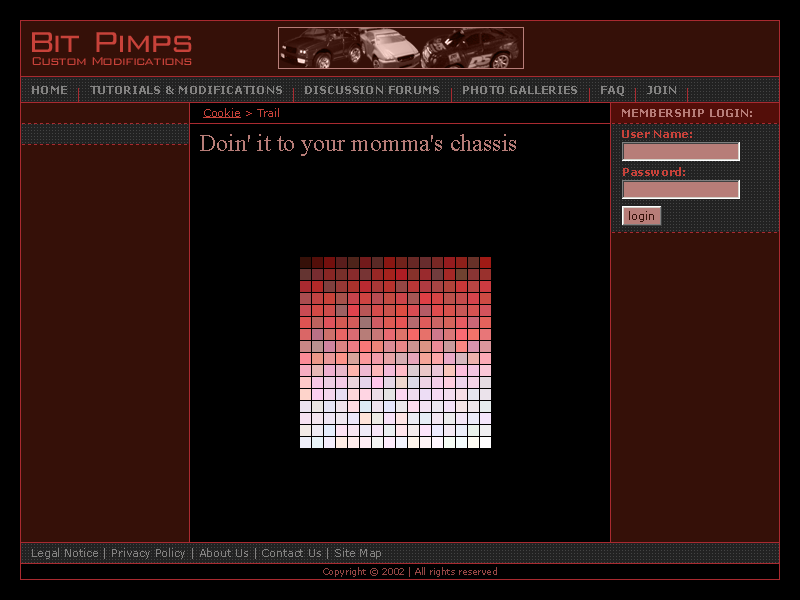
<style>
.page{position:relative;width:800px;height:600px;background:#000000}
.page>*{position:absolute;margin:0}
.t1{font:30px "WallStreet";letter-spacing:0.05em;color:#c8423a}
.t2{font:12px "WallStreet";letter-spacing:0.05em;color:#c8423a}
.t3{font:11px "Verdana";color:#c8423a}
.t4{font:11px "Verdana";color:#c8423a;text-decoration:underline}
.t5{font:11px "Verdana-Bold";color:#b77d78}
.t6{font:24px "TimesNewRomanPSMT";color:#b77d78}
.t7{font:11px "Verdana-Bold";color:#c8423a}
.t8{font:11px "Verdana";color:#838281}
.t9{font:9px "Verdana";color:#954644}
</style>
<div class="page">
<p class="t1" style="left:32px;top:32px;width:160px;height:20px">Bit Pimps</p>
<p class="t2" style="left:32px;top:57px;width:160px;height:8px">Custom Modifications</p>
<p class="t3" style="left:203px;top:108px;width:76px;height:10px"><span class="t4">Cookie</span> &gt; Trail</p>
<p class="t5" style="left:622px;top:109px;width:130px;height:8px">MEMBERSHIP LOGIN:</p>
<p class="t6" style="left:200px;top:134px;width:316px;height:22px">Doin' it to your momma's chassis</p>
<p class="t7" style="left:622px;top:130px;width:70px;height:8px">User Name:</p>
<p class="t7" style="left:623px;top:167px;width:62px;height:9px">Password:</p>
<p class="t8" style="left:32px;top:548px;width:349px;height:11px">Legal Notice | Privacy Policy | About Us | Contact Us | Site Map</p>
<p class="t9" style="left:323px;top:567px;width:174px;height:10px">Copyright © 2002 | All rights reserved</p>
</div>
